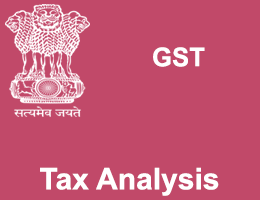
<style>
.page{position:relative;width:260px;height:200px;background:#c14969}
.page>*{position:absolute;margin:0}
.t1{font:25.9px "Arial-BoldMT";color:#ffffff}
.t2{font:30px "Arial-BoldMT";color:#ffffff}
</style>
<div class="page">
<p class="t1" style="left:153px;top:47px;width:52px;height:20px">GST</p>
<p class="t2" style="left:40px;top:167px;width:179px;height:29px">Tax Analysis</p>
</div>
